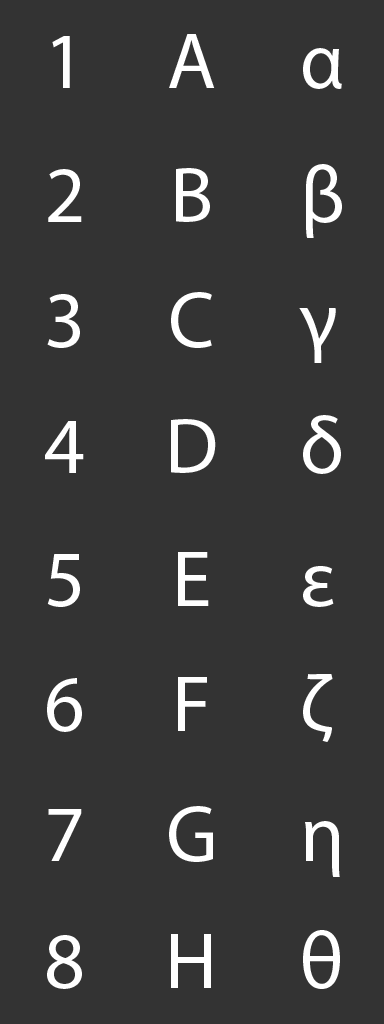
<style>
.page{position:relative;width:384px;height:1024px;background:#333333}
.page>*{position:absolute;margin:0}
.t1{font:80px "MyriadPro-Regular";color:#ffffff}
</style>
<div class="page">
<p class="t1" style="left:52px;top:36px;width:18px;height:52px">1</p>
<p class="t1" style="left:169px;top:34px;width:46px;height:54px">A</p>
<p class="t1" style="left:303px;top:48px;width:39px;height:41px">α</p>
<p class="t1" style="left:48px;top:169px;width:34px;height:53px">2</p>
<p class="t1" style="left:176px;top:168px;width:34px;height:54px">B</p>
<p class="t1" style="left:306px;top:164px;width:36px;height:74px">β</p>
<p class="t1" style="left:47px;top:294px;width:33px;height:54px">3</p>
<p class="t1" style="left:171px;top:292px;width:41px;height:56px">C</p>
<p class="t1" style="left:299px;top:308px;width:37px;height:55px">γ</p>
<p class="t1" style="left:45px;top:421px;width:39px;height:52px">4</p>
<p class="t1" style="left:171px;top:419px;width:45px;height:54px">D</p>
<p class="t1" style="left:303px;top:415px;width:38px;height:59px">δ</p>
<p class="t1" style="left:47px;top:554px;width:33px;height:53px">5</p>
<p class="t1" style="left:178px;top:552px;width:31px;height:54px">E</p>
<p class="t1" style="left:303px;top:566px;width:31px;height:41px">ε</p>
<p class="t1" style="left:47px;top:678px;width:35px;height:54px">6</p>
<p class="t1" style="left:178px;top:677px;width:29px;height:54px">F</p>
<p class="t1" style="left:303px;top:674px;width:30px;height:68px">ζ</p>
<p class="t1" style="left:48px;top:809px;width:34px;height:52px">7</p>
<p class="t1" style="left:169px;top:806px;width:44px;height:56px">G</p>
<p class="t1" style="left:305px;top:821px;width:35px;height:56px">η</p>
<p class="t1" style="left:47px;top:935px;width:35px;height:54px">8</p>
<p class="t1" style="left:171px;top:934px;width:40px;height:54px">H</p>
<p class="t1" style="left:303px;top:930px;width:37px;height:59px">θ</p>
</div>
